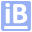
<style>
.page{position:relative;width:32px;height:32px;background:#97b1f4}
.page>*{position:absolute;margin:0}
.t1{font:30px "Calibri-Bold";color:#ffffff}
</style>
<div class="page">
<p class="t1" style="left:5px;top:3px;width:23px;height:21px">iB</p>
</div>
